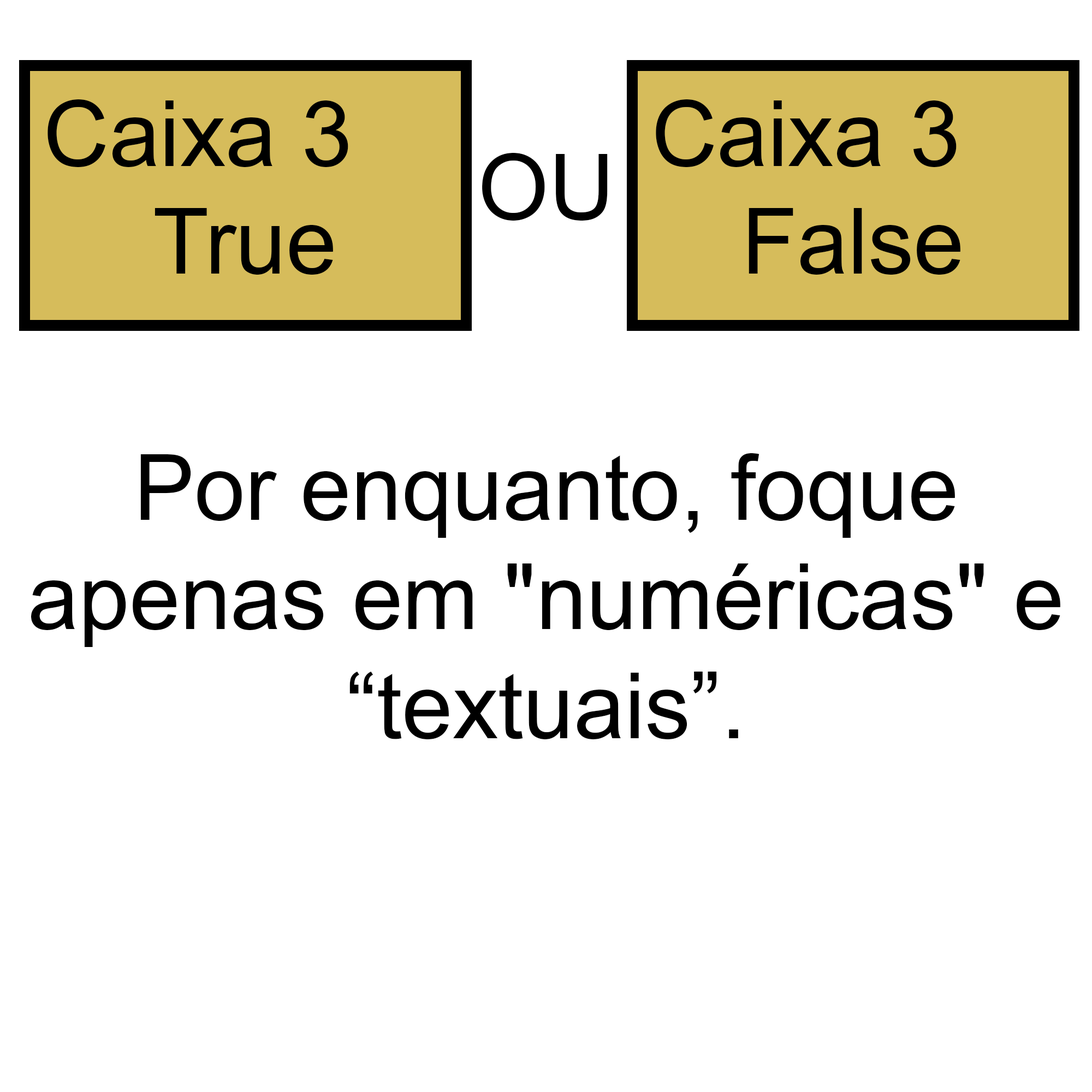
<style>
.page{position:relative;width:1092px;height:1092px;background:#ffffff}
.page>*{position:absolute;margin:0}
.t1{font:91px "ArialMT";color:#000000}
</style>
<div class="page">
<p class="t1" style="left:48px;top:99px;width:300px;height:68px">Caixa 3</p>
<p class="t1" style="left:656px;top:99px;width:301px;height:68px">Caixa 3</p>
<p class="t1" style="left:482px;top:153px;width:126px;height:68px">OU</p>
<p class="t1" style="left:155px;top:208px;width:178px;height:67px">True</p>
<p class="t1" style="left:749px;top:208px;width:211px;height:67px">False</p>
<p class="t1" style="left:31px;top:453px;width:1029px;height:286px;text-align:center">Por enquanto, foque<br>apenas em "numéricas" e<br>“textuais”.</p>
</div>
